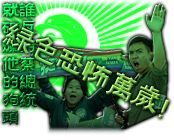
<style>
.page{position:relative;width:174px;height:140px}
.page>*{position:absolute;margin:0}
.t1{font:18.9px/17.2px "FZZJ-MSHLFW";letter-spacing:-0.05em}
</style>
<div class="page">
<p class="t1" style="left:1px;top:2px;width:37px;height:123px">谁反对蔡总统<br>就砸烂他的狗头</p>
</div>
